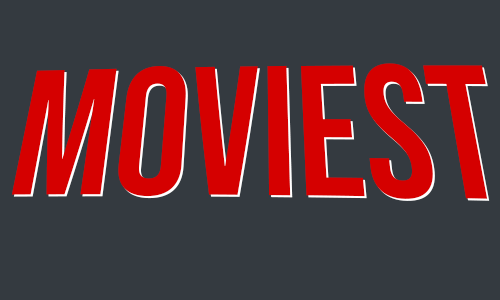
<style>
.page{position:relative;width:500px;height:300px;background:#343a40}
.page>*{position:absolute;margin:0}
.t1{font:184px "BebasNeue-Regular";color:#d50000}
</style>
<div class="page">
<p class="t1" style="left:11px;top:63px;width:477px;height:136px">Moviest</p>
<p class="t1" style="left:13px;top:65px;width:477px;height:136px">Moviest</p>
</div>
